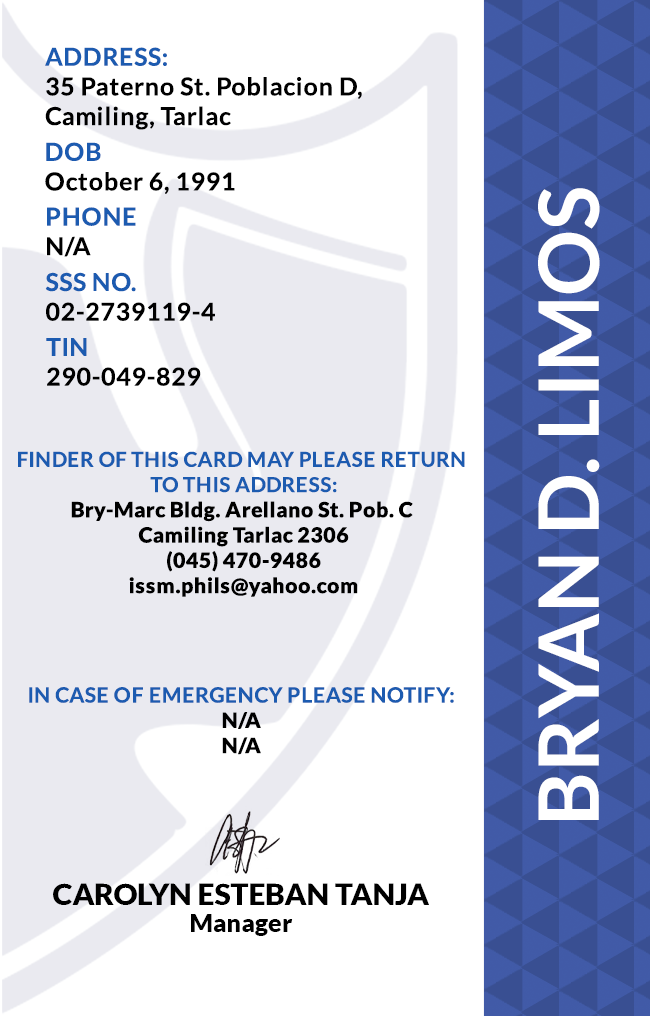
<style>
.page{position:relative;width:650px;height:1016px;background:#ffffff}
.page>*{position:absolute;margin:0}
.t1{font:24.7px/29.6px "Lato-Bold";letter-spacing:0.025em;color:#000000}
.t2{font:24.7px/29.6px "Lato-Bold";letter-spacing:0.025em}
.t3{font:83.3px "Lato-Bold";color:#ffffff}
.t4{font:24.7px/29.6px "Lato-Bold";letter-spacing:0.025em;color:#1c5bb0}
.t5{font:24.7px/29.6px "Lato-Bold";letter-spacing:0.025em;color:#202627}
.t6{font:21.1px "Lato-Black";letter-spacing:0.025em}
.t7{font:20.5px/25.3px "Lato-Bold";letter-spacing:0.025em;text-transform:uppercase}
.t8{font:21.1px/25.3px "Lato-Bold";letter-spacing:0.025em;color:#1c5bb0}
.t9{font:21.1px "Lato-Black";letter-spacing:0.025em;color:#273031}
.t10{font:29.5px "Lato-Black";color:#000000}
.t11{font:25px "Lato-Black";color:#000000}
</style>
<div class="page">
<p class="t1" style="left:45px;top:47px;width:317px;height:83px">ADDRESS:<br>35 Paterno St. Poblacion D, <br>Camiling, Tarlac</p>
<p class="t2" style="left:45px;top:142px;width:190px;height:52px">DOB<br>October 6, 1991</p>
<p class="t3" style="left:538px;top:188px;width:62px;height:632px;rotate:-90deg">BRYAN D. LIMOS</p>
<p class="t4" style="left:47px;top:207px;width:89px;height:50px">PHONE <br><span class="t5">N/A</span></p>
<p class="t2" style="left:45px;top:272px;width:170px;height:49px">SSS NO.<br>02-2739119-4</p>
<p class="t1" style="left:46px;top:338px;width:155px;height:48px">TIN<br>290-049-829</p>
<p class="t6" style="left:18px;top:451px;width:447px;height:146px;text-align:center"><span class="t7">Finder of this card may please return <br>to this address:<br></span>Bry-Marc Bldg. Arellano St. Pob. C <br>Camiling Tarlac 2306<br>(045) 470-9486<br>issm.phils@yahoo.com</p>
<p class="t8" style="left:29px;top:687px;width:425px;height:68px;text-align:center">IN CASE OF EMERGENCY PLEASE NOTIFY:<br><span class="t9">N/A<br>N/A</span></p>
<p class="t10" style="left:53px;top:883px;width:376px;height:22px">CAROLYN ESTEBAN TANJA</p>
<p class="t11" style="left:191px;top:914px;width:102px;height:22px">Manager</p>
</div>
